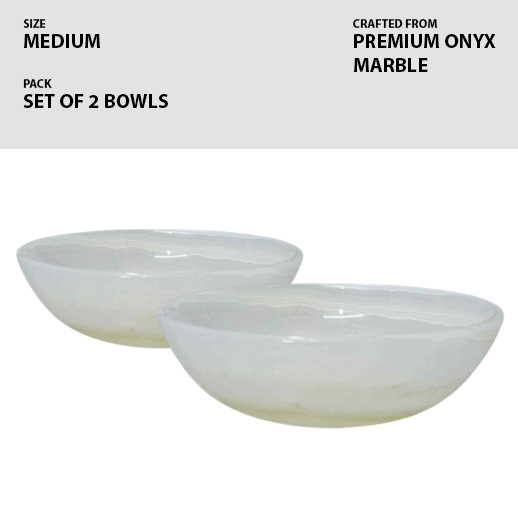
<style>
.page{position:relative;width:518px;height:518px;background:#ffffff}
.page>*{position:absolute;margin:0}
.t1{font:12px "MyriadPro-Bold";color:#000000}
.t2{font:20px "MyriadPro-Bold";color:#000000}
</style>
<div class="page">
<p class="t1" style="left:23px;top:19px;width:23px;height:9px">SIZE</p>
<p class="t1" style="left:353px;top:19px;width:84px;height:9px">CRAFTED FROM</p>
<p class="t2" style="left:24px;top:34px;width:76px;height:14px">MEDIUM</p>
<p class="t2" style="left:354px;top:34px;width:142px;height:38px">PREMIUM ONYX<br>MARBLE</p>
<p class="t1" style="left:23px;top:79px;width:29px;height:9px">PACK</p>
<p class="t2" style="left:23px;top:94px;width:145px;height:14px">SET OF 2 BOWLS</p>
</div>
